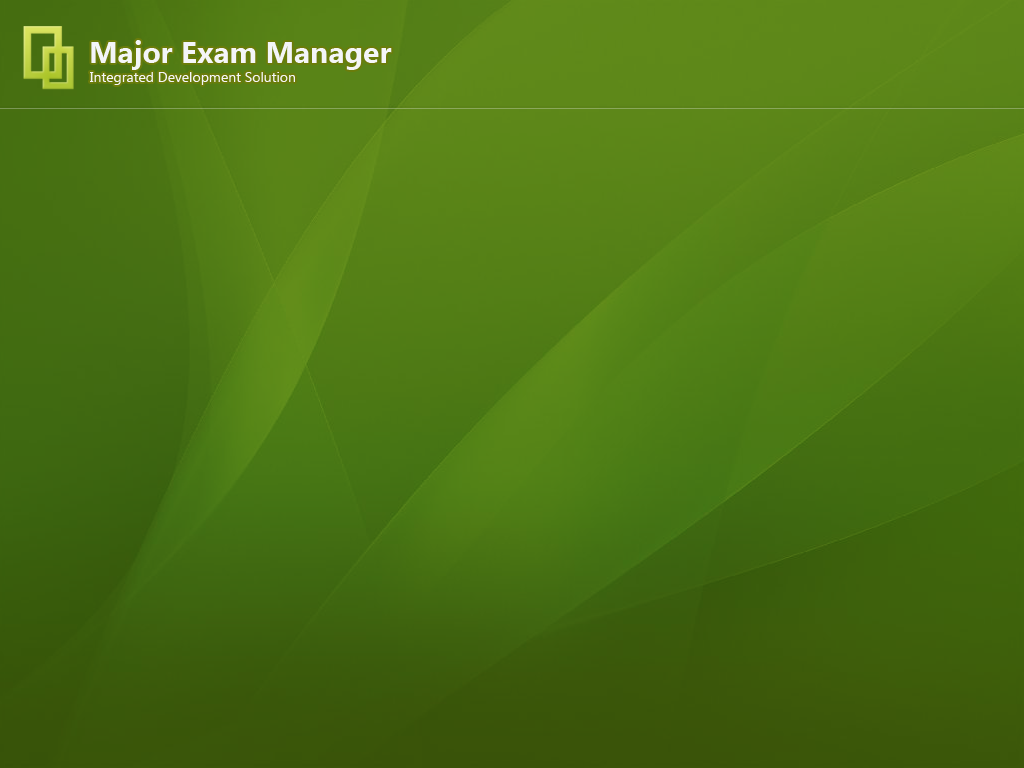
<style>
.page{position:relative;width:1024px;height:768px}
.page>*{position:absolute;margin:0}
.t1{font:30px "SegoeUI-Bold";color:#f4f5f8}
.t2{font:14px "SegoeUI";color:#f4f5f8}
</style>
<div class="page">
<p class="t1" style="left:91px;top:40px;width:301px;height:30px">Major Exam Manager</p>
<p class="t2" style="left:90px;top:72px;width:205px;height:13px">Integrated Development Solution</p>
</div>
